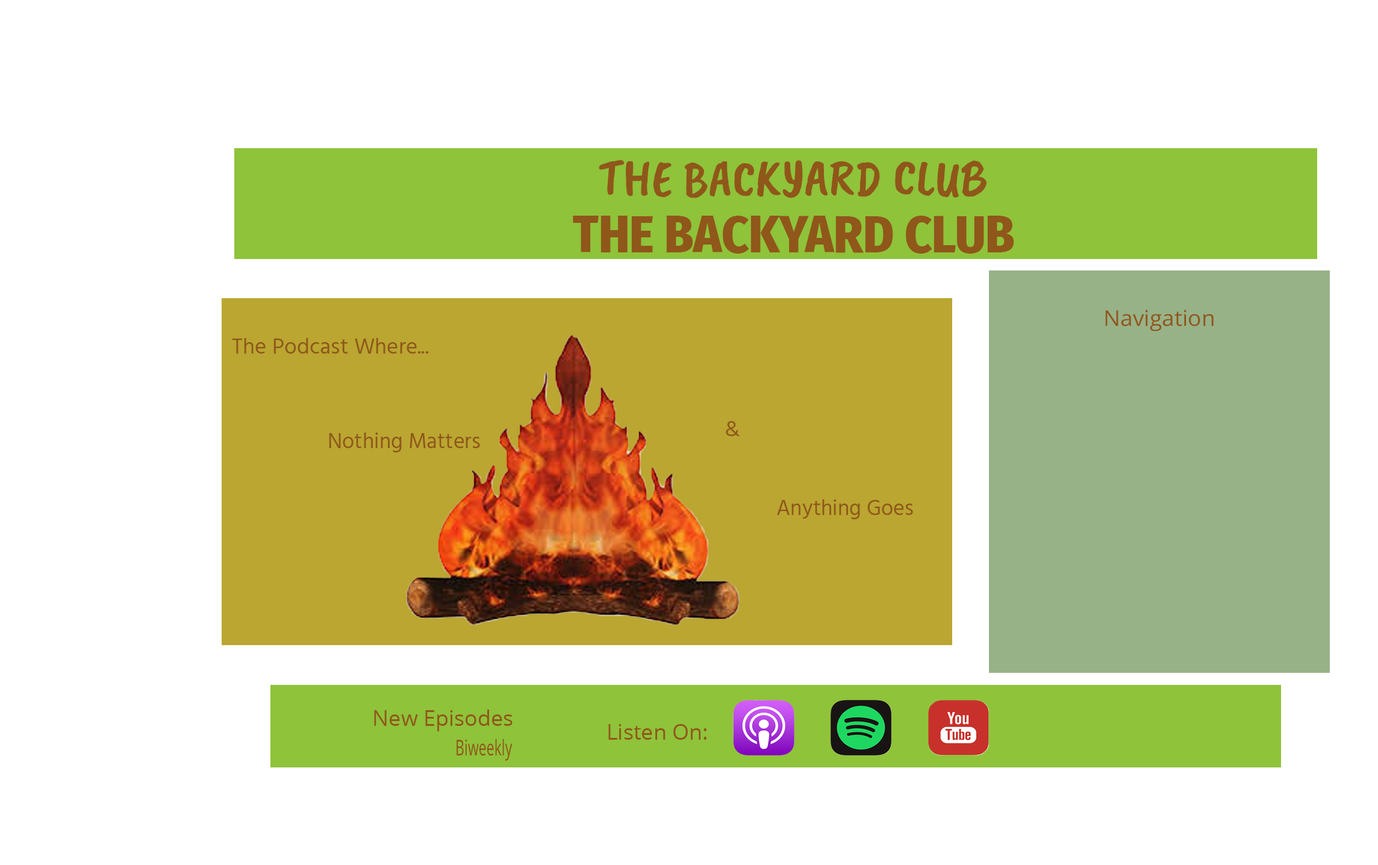
<style>
.page{position:relative;width:1378px;height:865px;background:#ffffff}
.page>*{position:absolute;margin:0}
.t1{font:51.8px "CaveatBrush-Regular";color:#8f571a}
.t2{font:51.8px "FiraSansCondensed-ExtraBold";color:#8f571a}
.t3{font:21.7px "OpenSans-Regular";color:#8f571a;scale:1.03 1}
.t4{font:21.7px "HindGuntur-Regular";color:#8f571a;scale:1.03 1}
.t5{font:21.7px "HindGuntur-Regular";color:#8f571a}
.t6{font:21.7px "OpenSans-Regular";color:#8f571a}
.t7{font:21.7px "OpenSans-Regular";color:#8f571a;scale:0.64 1}
</style>
<div class="page">
<p class="t1" style="left:599px;top:160px;width:388px;height:38px">THE BACKYARD CLUB</p>
<p class="t2" style="left:573px;top:216px;width:442px;height:38px">THE BACKYARD CLUB</p>
<p class="t3" style="left:1105px;top:310px;width:109px;height:21px">Navigation</p>
<p class="t4" style="left:232px;top:338px;width:197px;height:16px">The Podcast Where...</p>
<p class="t5" style="left:726px;top:421px;width:14px;height:15px">&amp;</p>
<p class="t5" style="left:329px;top:433px;width:151px;height:19px">Nothing Matters</p>
<p class="t5" style="left:777px;top:499px;width:136px;height:20px">Anything Goes</p>
<p class="t6" style="left:374px;top:710px;width:139px;height:21px">New Episodes</p>
<p class="t6" style="left:608px;top:724px;width:99px;height:16px">Listen On:</p>
<p class="t7" style="left:457px;top:739px;width:56px;height:22px">Biweekly</p>
</div>
